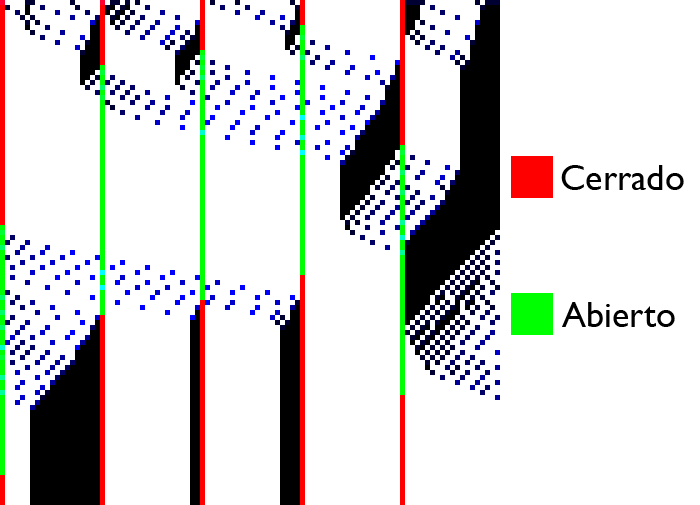
<style>
.page{position:relative;width:700px;height:505px;background:#ffffff}
.page>*{position:absolute;margin:0}
.t1{font:36px "GillSansMT";color:#000000}
</style>
<div class="page">
<p class="t1" style="left:561px;top:165px;width:123px;height:25px">Cerrado</p>
<p class="t1" style="left:562px;top:302px;width:113px;height:25px">Abierto</p>
</div>
